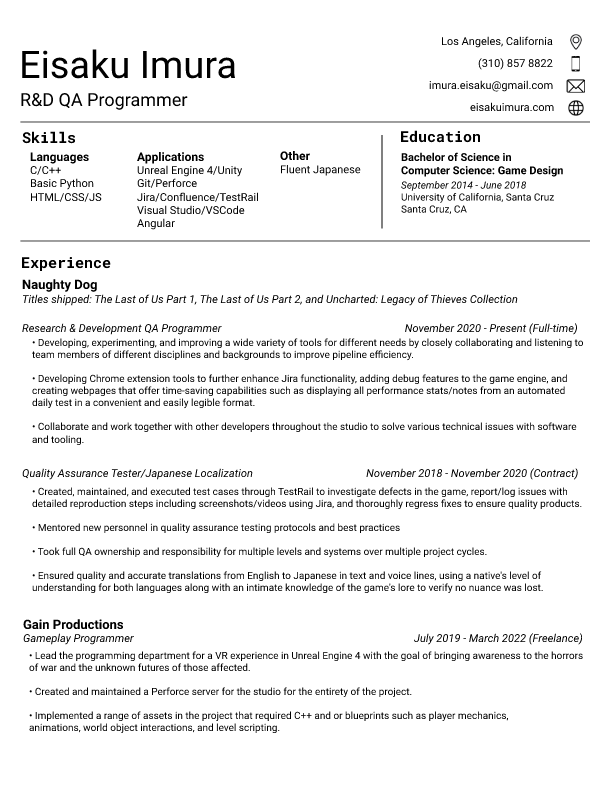
<style>
.page{position:relative;width:612px;height:792px;background:#ffffff}
.page>*{position:absolute;margin:0}
.t1{font:11px "Roboto-Regular";color:#000000}
.t2{font:38px "Roboto-Regular";color:#000000}
.t3{font:18px "Roboto-Regular";color:#000000}
.t4{font:15px "RobotoMono-Bold";color:#000000}
.t5{font:12px "Roboto-Bold";color:#000000}
.t6{font:11px "Roboto-Bold";color:#000000}
.t7{font:10px "Roboto-Italic";color:#000000}
.t8{font:10px "Roboto-Regular";color:#000000}
.t9{font:11px "Roboto-Italic";color:#000000}
.t10{font:13px "Roboto-Bold";color:#000000}
</style>
<div class="page">
<p class="t1" style="left:442px;top:36px;width:111px;height:12px">Los Angeles, California</p>
<p class="t2" style="left:22px;top:49px;width:213px;height:30px">Eisaku Imura</p>
<p class="t1" style="left:478px;top:58px;width:75px;height:12px">(310) 857 8822</p>
<p class="t1" style="left:429px;top:80px;width:124px;height:12px">imura.eisaku@gmail.com</p>
<p class="t3" style="left:21px;top:93px;width:167px;height:17px">R&amp;D QA Programmer</p>
<p class="t1" style="left:470px;top:102px;width:84px;height:9px">eisakuimura.com</p>
<p class="t4" style="left:22px;top:131px;width:53px;height:13px">Skills</p>
<p class="t4" style="left:401px;top:130px;width:79px;height:13px">Education</p>
<p class="t1" style="left:30px;top:152px;width:72px;height:50px"><span class="t5">Languages<br></span>C/C++<br>Basic Python<br>HTML/CSS/JS</p>
<p class="t1" style="left:137px;top:152px;width:121px;height:78px"><span class="t5">Applications<br></span>Unreal Engine 4/Unity<br>Git/Perforce<br>Jira/Confluence/TestRail<br>Visual Studio/VSCode<br>Angular</p>
<p class="t1" style="left:280px;top:151px;width:81px;height:25px"><span class="t5">Other<br></span>Fluent Japanese</p>
<p class="t6" style="left:401px;top:152px;width:162px;height:63px">Bachelor of Science in <br>Computer Science: Game Design<br><span class="t7">September 2014 - June 2018<br></span><span class="t8">University of California, Santa Cruz<br>Santa Cruz, CA</span></p>
<p class="t4" style="left:22px;top:257px;width:89px;height:14px">Experience</p>
<p class="t9" style="left:22px;top:279px;width:556px;height:56px"><span class="t10">Naughty Dog<br></span>Titles shipped: The Last of Us Part 1, The Last of Us Part 2, and Uncharted: Legacy of Thieves Collection<br><br>Research &amp; Development QA Programmer                                                                    November 2020 - Present (Full-time)</p>
<p class="t8" style="left:32px;top:338px;width:552px;height:256px">• Developing, experimenting, and improving a wide variety of tools for different needs by closely collaborating and listening to <br>team members of different disciplines and backgrounds to improve pipeline efficiency.<br><br>• Developing Chrome extension tools to further enhance Jira functionality, adding debug features to the game engine, and <br>creating webpages that offer time-saving capabilities such as displaying all performance stats/notes from an automated <br>daily test in a convenient and easily legible format.<br><br>• Collaborate and work together with other developers throughout the studio to solve various technical issues with software<br>and tooling.<br><br><br><br>• Created, maintained, and executed test cases through TestRail to investigate defects in the game, report/log issues with <br>detailed reproduction steps including screenshots/videos using Jira, and thoroughly regress fixes to ensure quality products.<br><br>• Mentored new personnel in quality assurance testing protocols and best practices<br><br>• Took full QA ownership and responsibility for multiple levels and systems over multiple project cycles.<br><br>• Ensured quality and accurate translations from English to Japanese in text and voice lines, using a native's level of <br>understanding for both languages along with an intimate knowledge of the game's lore to verify no nuance was lost.</p>
<p class="t9" style="left:22px;top:468px;width:556px;height:12px">Quality Assurance Tester/Japanese Localization                                          November 2018 - November 2020 (Contract)</p>
<p class="t9" style="left:23px;top:619px;width:560px;height:26px"><span class="t10">Gain Productions<br></span>Gameplay Programmer                                                                                                        July 2019 - March 2022 (Freelance)</p>
<p class="t8" style="left:29px;top:651px;width:554px;height:83px">• Lead the programming department for a VR experience in Unreal Engine 4 with the goal of bringing awareness to the horrors<br>of war and the unknown futures of those affected.<br><br>• Created and maintained a Perforce server for the studio for the entirety of the project.<br><br>• Implemented a range of assets in the project that required C++ and or blueprints such as player mechanics, <br>animations, world object interactions, and level scripting.</p>
</div>
